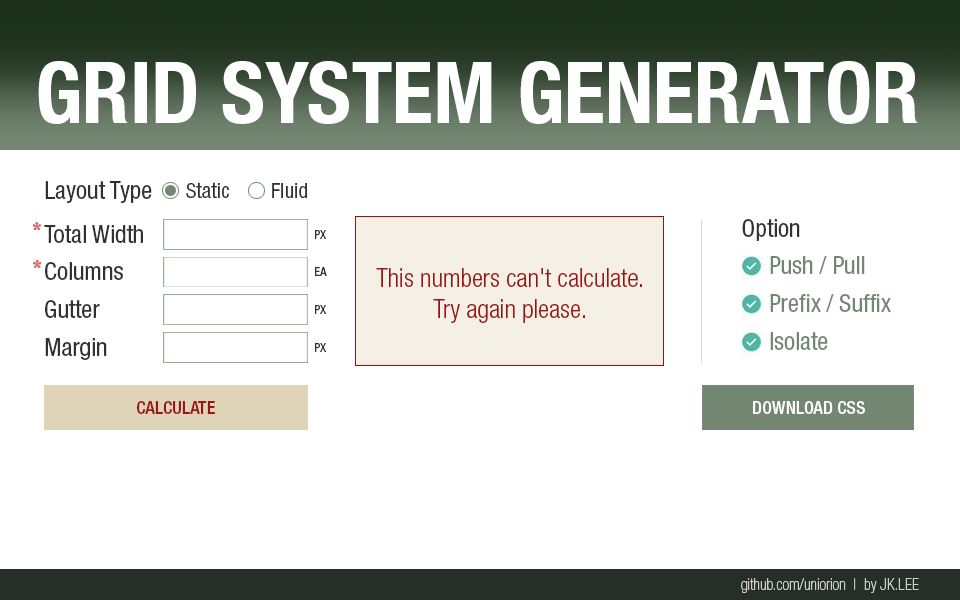
<style>
.page{position:relative;width:960px;height:600px;background:#ffffff}
.page>*{position:absolute;margin:0}
.t1{font:85px "HelveticaNeue-BoldCond";color:#ffffff}
.t2{font:24.6px "HelveticaNeue-Condensed";color:#313131}
.t3{font:21px "HelveticaNeue-Condensed";color:#313131}
.t4{font:12.3px "HelveticaNeue-Condensed";color:#313131}
.t5{font:24.6px "HelveticaNeue-Condensed";color:#738672}
.t6{font:25.7px "HelveticaNeue-LightCond";color:#991515}
.t7{font:18px "HelveticaNeue-MediumCond";color:#991515}
.t8{font:18px "HelveticaNeue-MediumCond";color:#ffffff}
.t9{font:16px "HelveticaNeue-ThinCond";color:#ffffff}
.t10{font:16px "HelveticaNeue-ThinCond";color:#e6e6e6}
.t11{font:16px "HelveticaNeue-ThinCond";color:#cfd0cf}
</style>
<div class="page">
<p class="t1" style="left:38px;top:61px;width:880px;height:63px">GRID SYSTEM GENERATOR</p>
<p class="t2" style="left:45px;top:181px;width:107px;height:22px">Layout Type</p>
<p class="t3" style="left:186px;top:182px;width:43px;height:16px">Static</p>
<p class="t3" style="left:272px;top:183px;width:35px;height:15px">Fluid</p>
<p class="t2" style="left:742px;top:219px;width:58px;height:22px">Option</p>
<p class="t2" style="left:44px;top:225px;width:99px;height:18px">Total Width</p>
<p class="t4" style="left:315px;top:230px;width:11px;height:9px">PX</p>
<p class="t5" style="left:770px;top:256px;width:95px;height:18px">Push / Pull</p>
<p class="t2" style="left:45px;top:262px;width:78px;height:18px">Columns</p>
<p class="t4" style="left:315px;top:267px;width:12px;height:9px">EA</p>
<p class="t6" style="left:376px;top:268px;width:266px;height:55px;text-align:center">This numbers can't calculate.<br>Try again please.</p>
<p class="t5" style="left:770px;top:294px;width:121px;height:18px">Prefix / Suffix</p>
<p class="t2" style="left:45px;top:300px;width:55px;height:18px">Gutter</p>
<p class="t4" style="left:315px;top:305px;width:11px;height:9px">PX</p>
<p class="t2" style="left:45px;top:338px;width:62px;height:22px">Margin</p>
<p class="t5" style="left:770px;top:332px;width:58px;height:18px">Isolate</p>
<p class="t4" style="left:315px;top:343px;width:11px;height:9px">PX</p>
<p class="t7" style="left:137px;top:401px;width:78px;height:13px">CALCULATE</p>
<p class="t8" style="left:753px;top:401px;width:112px;height:13px">DOWNLOAD CSS</p>
<p class="t9" style="left:741px;top:578px;width:115px;height:15px;opacity:0.7">github.com/uniorion  <span class="t10">l</span></p>
<p class="t11" style="left:864px;top:578px;width:55px;height:15px">by JK.LEE</p>
</div>
